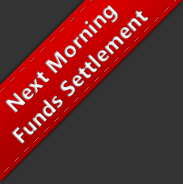
<style>
.page{position:relative;width:183px;height:184px;background:#333333}
.page>*{position:absolute;margin:0}
.t1{font:22px "MicrosoftTaiLe-Bold"}
</style>
<div class="page">
<p class="t1" style="left:4px;top:4px;width:144px;height:140px;text-align:center;rotate:-45deg">Next Morning<br>Funds Settlement</p>
</div>
